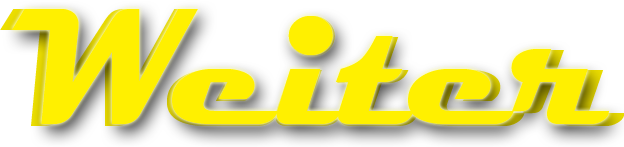
<style>
.page{position:relative;width:624px;height:147px;background:#fff000}
.page>*{position:absolute;margin:0}
.t1{font:170.4px "Magneto-Bold";color:#eddf00}
.t2{font:167px "Magneto-Bold";color:#fff000}
</style>
<div class="page">
<p class="t1" style="left:0px;top:9px;width:624px;height:117px">Weiter</p>
<p class="t2" style="left:12px;top:9px;width:597px;height:115px">Weiter</p>
</div>
